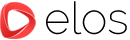
<style>
.page{position:relative;width:130px;height:40px;background:#ffffff}
.page>*{position:absolute;margin:0}
.t1{font:45px "Raleway-ExtraLight";color:#000000}
</style>
<div class="page">
<p class="t1" style="left:46px;top:1px;width:81px;height:34px">elos</p>
</div>
